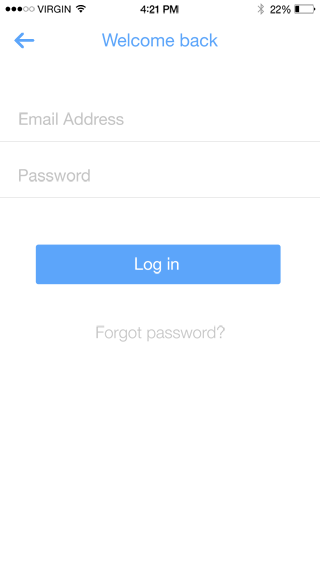
<style>
.page{position:relative;width:320px;height:569px;background:#ffffff}
.page>*{position:absolute;margin:0}
.t1{font:9.8px "HelveticaNeue";letter-spacing:0.02em;color:#000000}
.t2{font:10.3px "HelveticaNeue-Medium";letter-spacing:-0.02em;color:#000000}
.t3{font:11.1px "Avenir-Medium";letter-spacing:-0.02em;color:#000000}
.t4{font:10.3px "HelveticaNeue";letter-spacing:-0.02em}
.t5{font:17.6px "HelveticaNeue";color:#5ca5fa}
.t6{font:16.5px "HelveticaNeue";color:#c4c4c4}
.t7{font:16.5px "HelveticaNeue";color:#ffffff}
.t8{font:16.5px "HelveticaNeue-Light";color:#c4c4c4}
</style>
<div class="page">
<p class="t1" style="left:37px;top:5px;width:34px;height:8px">VIRGIN</p>
<p class="t2" style="left:140px;top:5px;width:39px;height:9px">4<span class="t3">:</span>21 PM</p>
<p class="t4" style="left:270px;top:5px;width:21px;height:9px">22%</p>
<p class="t5" style="left:102px;top:33px;width:116px;height:14px">Welcome back</p>
<p class="t6" style="left:19px;top:112px;width:105px;height:13px">Email Address</p>
<p class="t6" style="left:19px;top:169px;width:71px;height:13px">Password</p>
<p class="t7" style="left:135px;top:257px;width:44px;height:17px">Log in</p>
<p class="t8" style="left:96px;top:325px;width:129px;height:17px">Forgot password?</p>
</div>
